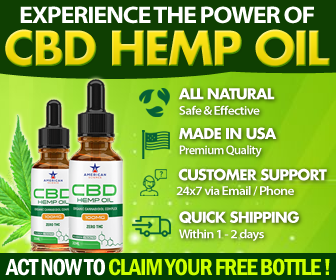
<style>
.page{position:relative;width:336px;height:280px}
.page>*{position:absolute;margin:0}
.t1{font:24px "MyriadPro-BoldSemiExt";letter-spacing:-0.05em;color:#ffffff;text-transform:uppercase}
.t2{font:47px "FuturaLT-Bold";letter-spacing:-0.05em}
.t3{font:12.6px/15.4px "MyriadPro-SemiboldSemiExt";letter-spacing:-0.05em;color:#ffffff}
.t4{font:14.7px/15.4px "FuturaLT-Bold";letter-spacing:-0.05em;color:#ffffff}
.t5{font:12.6px/15.4px "MyriadPro-Semibold";letter-spacing:-0.05em;color:#ffffff}
.t6{font:12.6px/14.7px "MyriadPro-SemiboldSemiExt";letter-spacing:-0.05em;color:#ffffff}
.t7{font:14.7px/14.7px "MyriadPro-Semibold";letter-spacing:-0.05em;color:#08ad58}
.t8{font:14.7px/14.7px "FuturaLT-Bold";letter-spacing:-0.05em;color:#ffffff}
.t9{font:24px "FranklinGothic-DemiCond";letter-spacing:-0.05em;color:#ccff00;text-transform:uppercase}
.t10{font:24px "FranklinGothic-DemiCond";letter-spacing:-0.05em;color:#ffffff;text-transform:uppercase}
</style>
<div class="page">
<p class="t1" style="left:20px;top:6px;width:294px;height:18px">Experience The Power Of</p>
<p class="t2" style="left:5px;top:29px;width:325px;height:39px">CBD HEMP OIL</p>
<p class="t3" style="left:178px;top:88px;width:97px;height:27px"><span class="t4">ALL NATURAL<br></span>Safe &amp; Effective</p>
<p class="t5" style="left:179px;top:127px;width:98px;height:30px"><span class="t4">MADE IN USA<br></span>Premium Quality</p>
<p class="t6" style="left:176px;top:168px;width:151px;height:28px"><span class="t7"> </span><span class="t8">CUSTOMER SUPPORT<br></span>24x7 via Email / Phone</p>
<p class="t3" style="left:179px;top:211px;width:120px;height:30px"><span class="t4">QUICK SHIPPING<br></span>Within 1 - 2 days</p>
<p class="t9" style="left:5px;top:258px;width:325px;height:18px"><span class="t10">Act Now To </span>Claim Your Free Bottle !</p>
</div>
